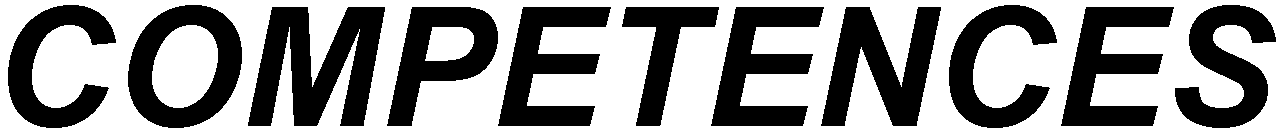
<style>
.page{position:relative;width:1286px;height:128px;background:#ffffff}
.page>*{position:absolute;margin:0}
.t1{font:166.4px "Arial-BoldItalicMT";color:#000000}
</style>
<div class="page">
<p class="t1" style="left:8px;top:5px;width:1268px;height:123px">COMPETENCES</p>
</div>
